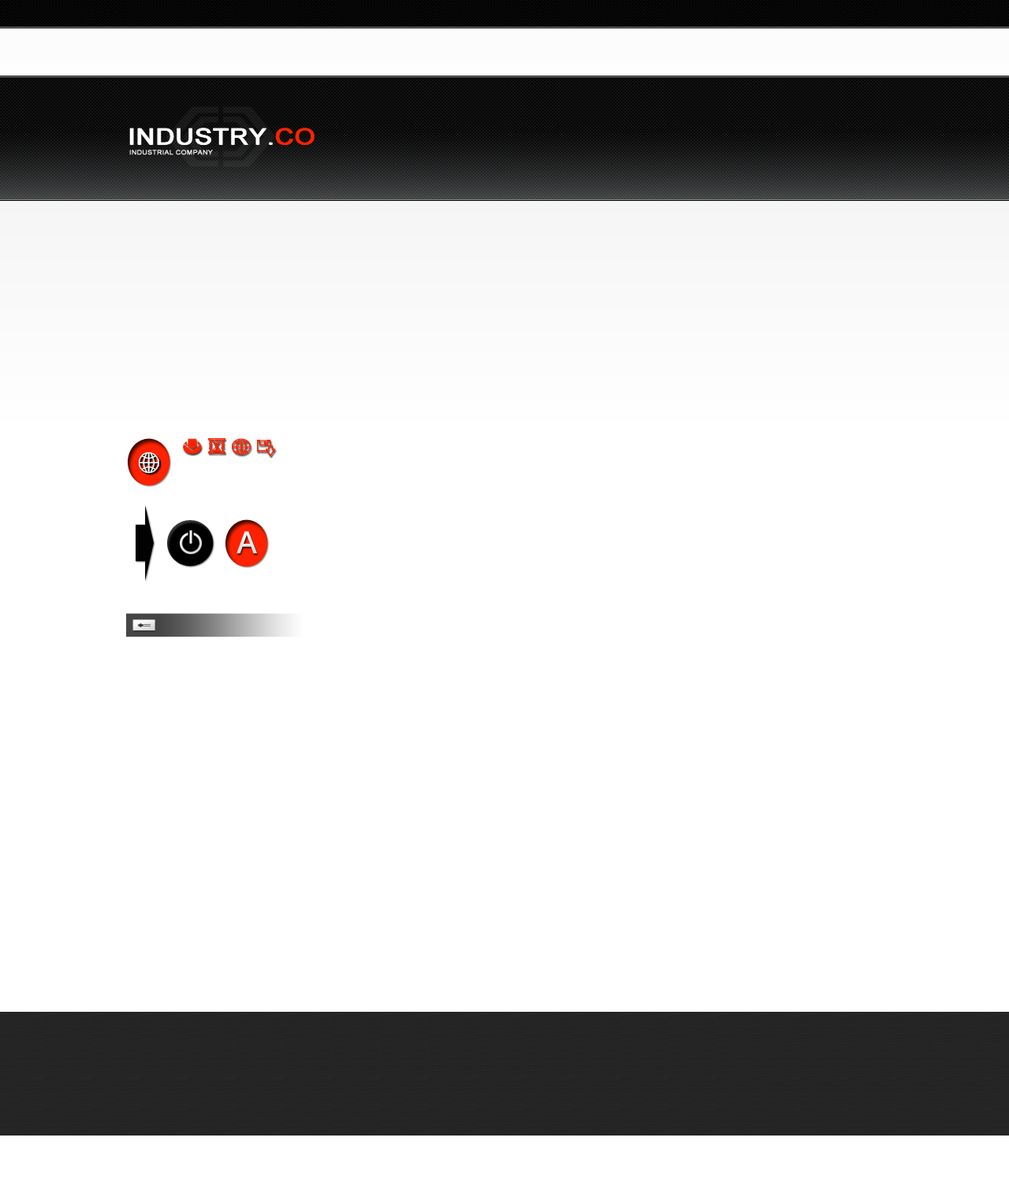
<style>
.page{position:relative;width:1009px;height:1182px;background:#ffffff}
.page>*{position:absolute;margin:0}
.t1{font:22.6px "ArialMT";color:#ffffff;font-weight:bold;scale:1.16 1}
.t2{font:22.6px "ArialMT";color:#ff2200;font-weight:bold;scale:1.16 1}
.t3{font:6.3px "ArialMT";color:#ffffff;font-weight:bold;scale:1.13 1}
.t4{font:29.9px "ArialMT";color:#e9e9e8;font-weight:bold}
</style>
<div class="page">
<p class="t1" style="left:129px;top:128px;width:185px;height:17px">INDUSTRY.<span class="t2">CO</span></p>
<p class="t1" style="left:130px;top:128px;width:184px;height:17px">INDUSTRY.<span class="t2">CO</span></p>
<p class="t3" style="left:129px;top:150px;width:84px;height:5px">INDUSTRIAL COMPANY</p>
<p class="t4" style="left:236px;top:531px;width:21px;height:23px">A</p>
</div>
